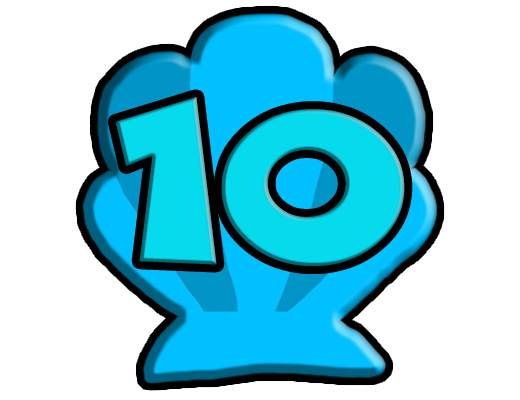
<style>
.page{position:relative;width:520px;height:400px;background:#ffffff}
.page>*{position:absolute;margin:0}
.t1{font:229.3px "Funhouse";color:#06daed}
</style>
<div class="page">
<p class="t1" style="left:115px;top:97px;width:290px;height:169px">10</p>
</div>
